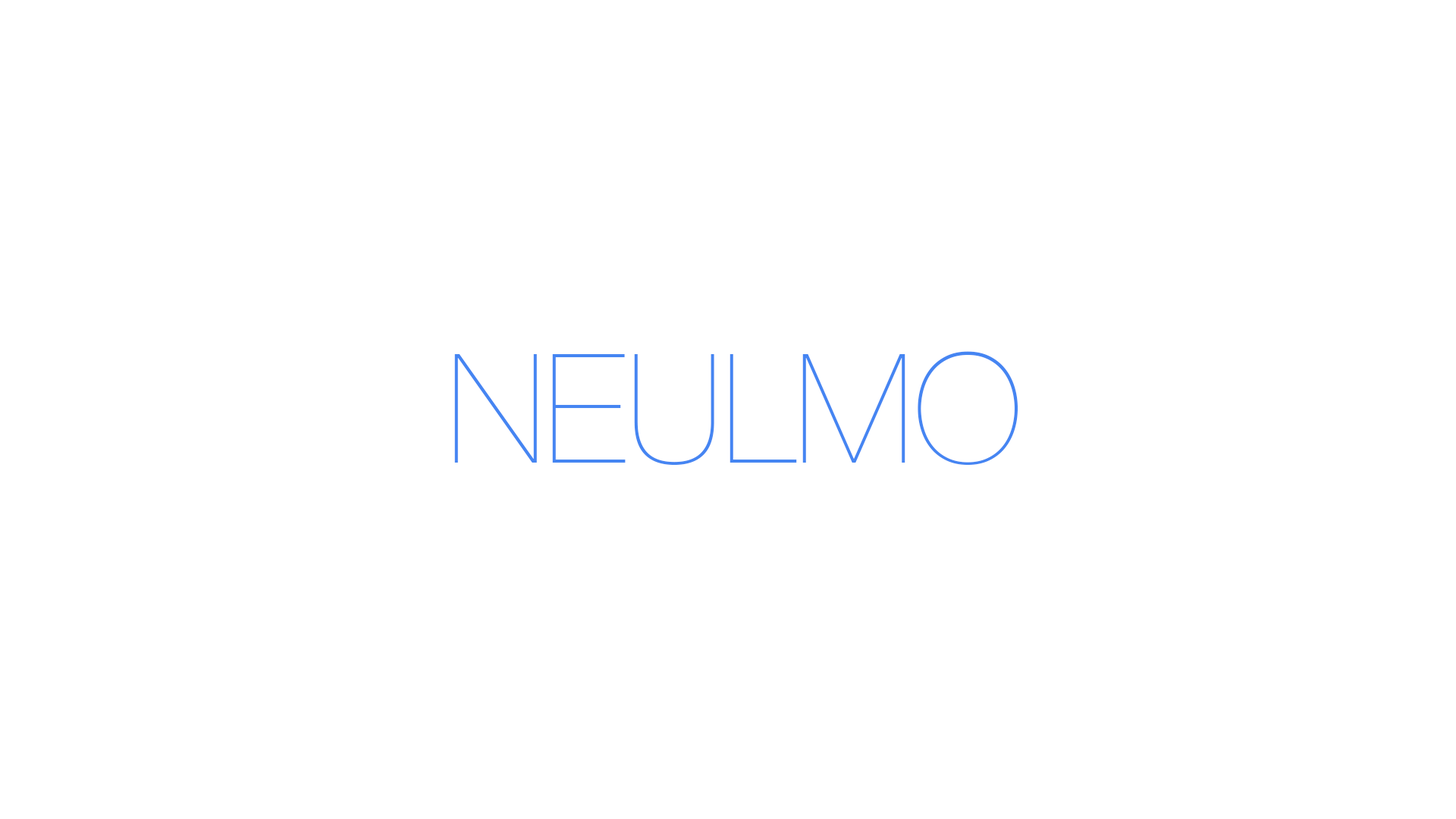
<style>
.page{position:relative;width:1456px;height:819px;background:#ffffff}
.page>*{position:absolute;margin:0}
.t1{font:151.7px "HelveticaNeue-UltraLight";color:#4585f2}
</style>
<div class="page">
<p class="t1" style="left:454px;top:351px;width:564px;height:114px">NEULMO</p>
</div>
